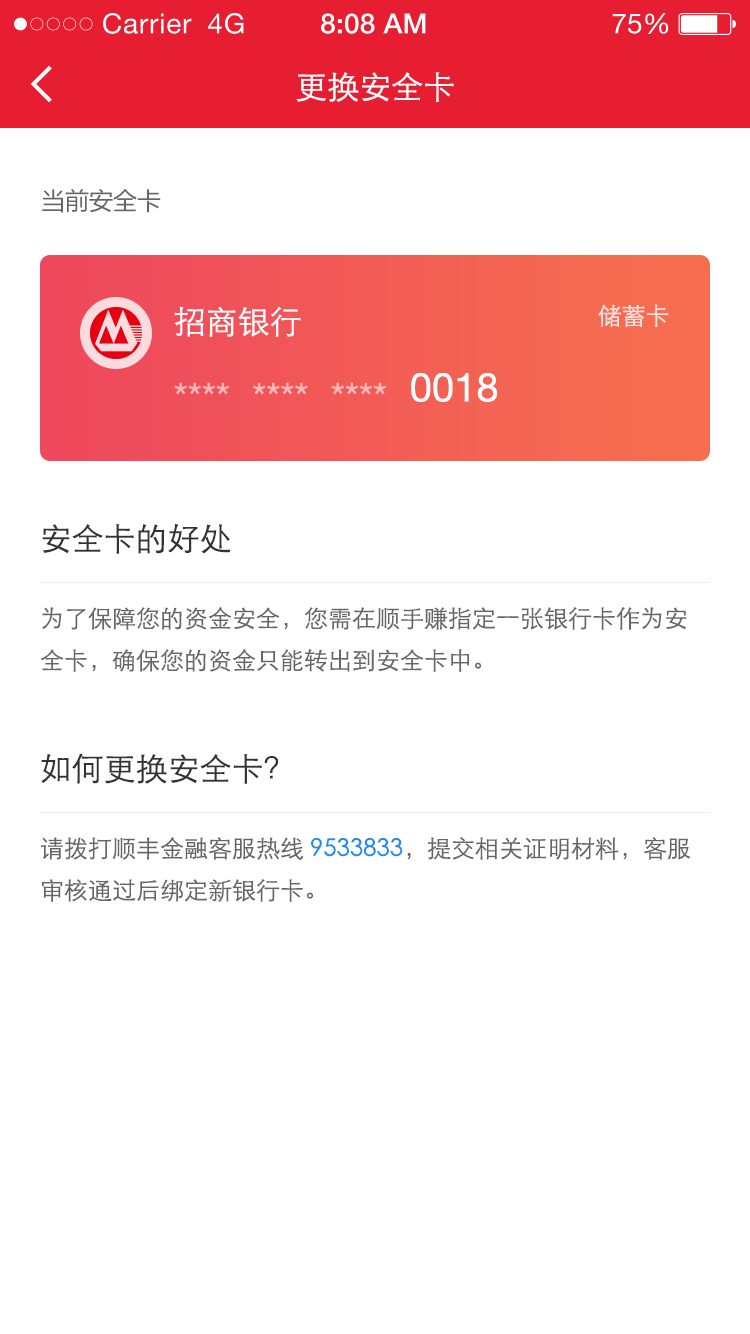
<style>
.page{position:relative;width:750px;height:1334px;background:#ffffff}
.page>*{position:absolute;margin:0}
.t1{font:32px "STXihei";color:#ffffff}
.t2{font:24px "MicrosoftYaHei";color:#666666}
.t3{font:24px "STXihei";color:#fde6e3}
.t4{font:40px "HelveticaNeue";color:#ffffff}
.t5{font:40px "HelveticaNeue";color:#f8b7b8}
.t6{font:32px "STXihei";color:#333333}
.t7{font:24px "STXihei";color:#666666}
.t8{font:24px "STXihei";color:#1c8bf3}
</style>
<div class="page">
<p class="t1" style="left:296px;top:72px;width:158px;height:30px">更换安全卡</p>
<p class="t2" style="left:42px;top:188px;width:119px;height:25px">当前安全卡</p>
<p class="t3" style="left:598px;top:304px;width:71px;height:23px">储蓄卡</p>
<p class="t1" style="left:174px;top:306px;width:127px;height:31px">招商银行</p>
<p class="t4" style="left:411px;top:373px;width:87px;height:29px">0018</p>
<p class="t5" style="left:174px;top:382px;width:213px;height:13px">****  ****  ****</p>
<p class="t6" style="left:42px;top:523px;width:189px;height:31px">安全卡的好处</p>
<p class="t7" style="left:40px;top:607px;width:647px;height:65px">为了保障您的资金安全，您需在顺手赚指定一张银行卡作为安全卡，确保您的资金只能转出到安全卡中。</p>
<p class="t6" style="left:41px;top:753px;width:238px;height:31px">如何更换安全卡？</p>
<p class="t7" style="left:41px;top:837px;width:650px;height:65px">请拨打顺丰金融客服热线<span class="t8">9533833</span>，提交相关证明材料，客服审核通过后绑定新银行卡。</p>
</div>
